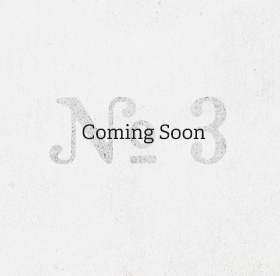
<style>
.page{position:relative;width:280px;height:276px}
.page>*{position:absolute;margin:0}
.t1{font:20px "AdelleW01-Regular";color:#231f20}
</style>
<div class="page">
<p class="t1" style="left:82px;top:124px;width:123px;height:20px">Coming Soon</p>
</div>
